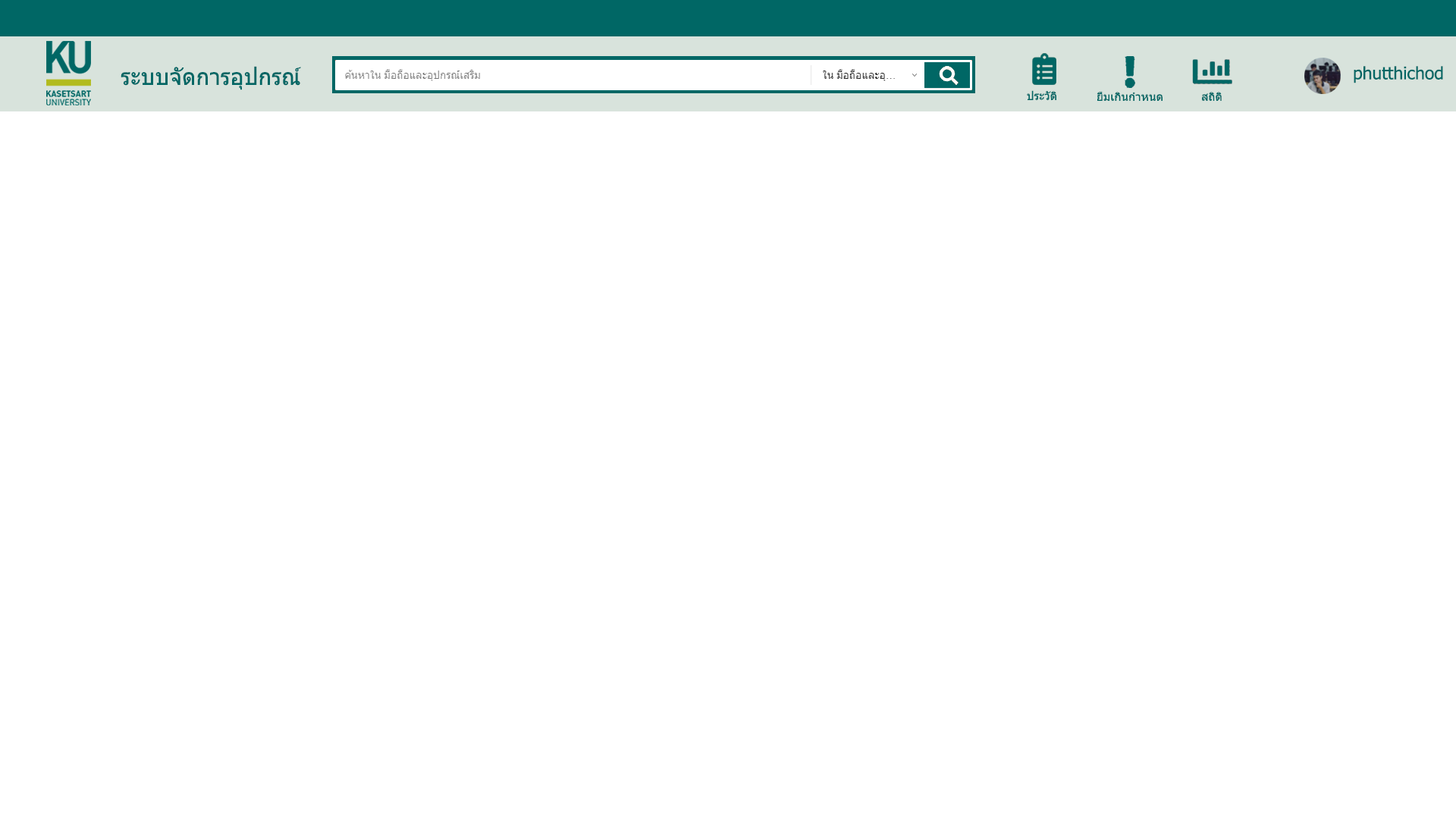
<style>
.page{position:relative;width:1456px;height:819px;background:#ffffff}
.page>*{position:absolute;margin:0}
.t1{font:22.7px "Tahoma";color:#006765}
.t2{font:17.1px "Tahoma";color:#006765}
.t3{font:11.2px "Tahoma";color:#006765;scale:1.04 1}
</style>
<div class="page">
<p class="t1" style="left:121px;top:66px;width:180px;height:24px">ระบบจัดการอุปกรณ์</p>
<p class="t2" style="left:1354px;top:66px;width:89px;height:17px">phutthichod</p>
<p class="t3" style="left:1027px;top:90px;width:29px;height:10px">ประวัติ</p>
<p class="t3" style="left:1097px;top:91px;width:66px;height:10px">ยืมเกินกำหนด</p>
<p class="t3" style="left:1202px;top:92px;width:20px;height:9px">สถิติ</p>
</div>
